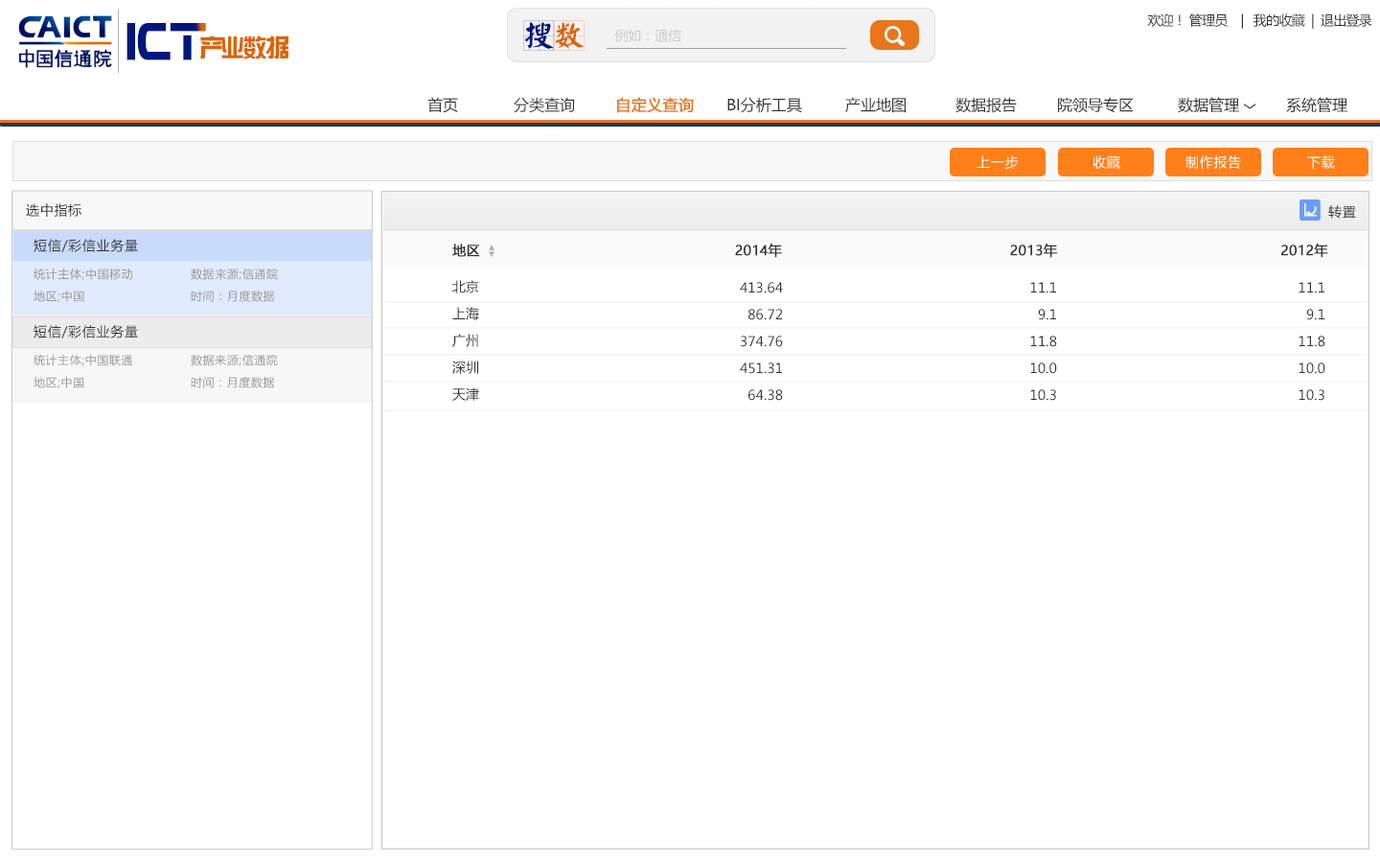
<style>
.page{position:relative;width:1380px;height:864px;background:#ffffff}
.page>*{position:absolute;margin:0}
.t1{font:13.4px "MicrosoftYaHei";letter-spacing:-0.05em;color:#333333}
.t2{font:42.7px "BoomBox";color:#001966}
.t3{font:42.7px "BoomBox";letter-spacing:-0.1em;color:#001966}
.t4{font:30.2px "YankaigungEG-Ultra-GB";color:#00177c}
.t5{font:30.2px "YankaigungEG-Ultra-GB";color:#de6200}
.t6{font:13.4px "MicrosoftYaHei";color:#cccccc}
.t7{font:24.7px "FZZYJW--GB1-0";letter-spacing:-0.08em;color:#de6200}
.t8{font:24.7px "FZZYJW--GB1-0";letter-spacing:-0.14em;color:#de6200}
.t9{font:15.3px "MicrosoftYaHei";color:#333333}
.t10{font:15.3px "MicrosoftYaHei";color:#e8761b;font-weight:bold}
.t11{font:15.3px "MicrosoftYaHei";color:#333333;scale:0.8 1}
.t12{font:13.4px "MicrosoftYaHei";letter-spacing:0.05em;color:#ffffff}
.t13{font:13.4px "MicrosoftYaHei";letter-spacing:0.05em;color:#333333}
.t14{font:13.4px "MicrosoftYaHei";letter-spacing:0.01em;color:#333333;font-weight:bold}
.t15{font:11.5px "MicrosoftYaHei";letter-spacing:0.05em;color:#999999}
.t16{font:13.4px/26.8px "MicrosoftYaHei";letter-spacing:0.01em;color:#333333}
.t17{font:13.5px "MicrosoftYaHei";letter-spacing:0.05em;color:#333333}
</style>
<div class="page">
<p class="t1" style="left:1148px;top:13px;width:225px;height:16px">欢迎！ 管理员    |   我的收藏  |  退出登录</p>
<p class="t2" style="left:127px;top:23px;width:79px;height:37px">IC<span class="t3">T</span></p>
<p class="t4" style="left:523px;top:20px;width:62px;height:31px">搜<span class="t5">数</span></p>
<p class="t6" style="left:615px;top:29px;width:67px;height:13px">例如：通信</p>
<p class="t7" style="left:200px;top:35px;width:89px;height:23px"><span class="t8">产</span>业数据</p>
<p class="t9" style="left:428px;top:97px;width:30px;height:16px">首页</p>
<p class="t9" style="left:514px;top:97px;width:61px;height:16px">分类查询</p>
<p class="t10" style="left:617px;top:97px;width:77px;height:16px">自定义查询</p>
<p class="t9" style="left:728px;top:97px;width:74px;height:16px">BI分析工具</p>
<p class="t9" style="left:846px;top:97px;width:60px;height:16px">产业地图</p>
<p class="t9" style="left:956px;top:97px;width:61px;height:16px">数据报告</p>
<p class="t9" style="left:1058px;top:97px;width:76px;height:16px">院领导专区</p>
<p class="t9" style="left:1178px;top:97px;width:79px;height:16px">数据管理 <span class="t11">﹀</span></p>
<p class="t9" style="left:1287px;top:97px;width:61px;height:16px">系统管理</p>
<p class="t12" style="left:977px;top:155px;width:42px;height:14px">上一步</p>
<p class="t12" style="left:1093px;top:155px;width:28px;height:14px">收藏</p>
<p class="t12" style="left:1186px;top:155px;width:55px;height:14px">制作报告</p>
<p class="t12" style="left:1308px;top:155px;width:27px;height:14px">下载</p>
<p class="t13" style="left:26px;top:203px;width:55px;height:14px">选中指标</p>
<p class="t13" style="left:1329px;top:205px;width:28px;height:14px">转置</p>
<p class="t13" style="left:34px;top:239px;width:104px;height:13px">短信/彩信业务量</p>
<p class="t14" style="left:452px;top:244px;width:877px;height:14px">地区                                                         2014年                                                   2013年                                                  2012年</p>
<p class="t15" style="left:34px;top:267px;width:98px;height:13px">统计主体;中国移动</p>
<p class="t15" style="left:191px;top:268px;width:87px;height:12px">数据来源;信通院</p>
<p class="t16" style="left:452px;top:280px;width:27px;height:121px;text-align:right">北京<br>上海<br>广州<br>深圳<br>天津</p>
<p class="t16" style="left:740px;top:282px;width:43px;height:119px;text-align:right">413.64<br>86.72<br>374.76<br>451.31<br>64.38</p>
<p class="t16" style="left:1031px;top:282px;width:26px;height:119px;text-align:right">11.1<br>9.1<br>11.8<br>10.0<br>10.3</p>
<p class="t16" style="left:1299px;top:282px;width:27px;height:119px;text-align:right">11.1<br>9.1<br>11.8<br>10.0<br>10.3</p>
<p class="t15" style="left:34px;top:290px;width:50px;height:12px">地区;中国</p>
<p class="t15" style="left:191px;top:290px;width:84px;height:12px">时间：月度数据</p>
<p class="t17" style="left:34px;top:325px;width:104px;height:13px">短信/彩信业务量</p>
<p class="t15" style="left:34px;top:354px;width:98px;height:12px">统计主体;中国联通</p>
<p class="t15" style="left:191px;top:354px;width:87px;height:12px">数据来源;信通院</p>
<p class="t15" style="left:34px;top:377px;width:50px;height:11px">地区;中国</p>
<p class="t15" style="left:191px;top:377px;width:83px;height:11px">时间：月度数据</p>
</div>
